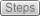
<style>
.page{position:relative;width:40px;height:16px}
.page>*{position:absolute;margin:0}
.t1{font:12px "ArialMT";color:#6e6e6e;scale:0.97 1}
</style>
<div class="page">
<p class="t1" style="left:5px;top:2px;width:30px;height:13px">Steps</p>
</div>
